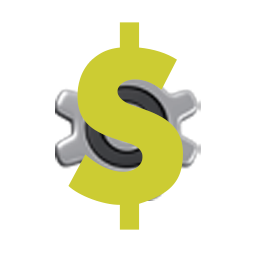
<style>
.page{position:relative;width:256px;height:256px;background:#ffffff}
.page>*{position:absolute;margin:0}
.t1{font:208.3px "Futura-Bold";color:#cccc33}
</style>
<div class="page">
<p class="t1" style="left:68px;top:22px;width:115px;height:208px">$</p>
</div>
